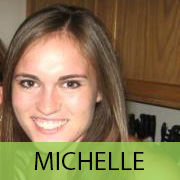
<style>
.page{position:relative;width:180px;height:180px}
.page>*{position:absolute;margin:0}
.t1{font:26.7px "MyriadPro-Regular";color:#030303}
</style>
<div class="page">
<p class="t1" style="left:34px;top:152px;width:110px;height:18px">MICHELLE</p>
</div>
